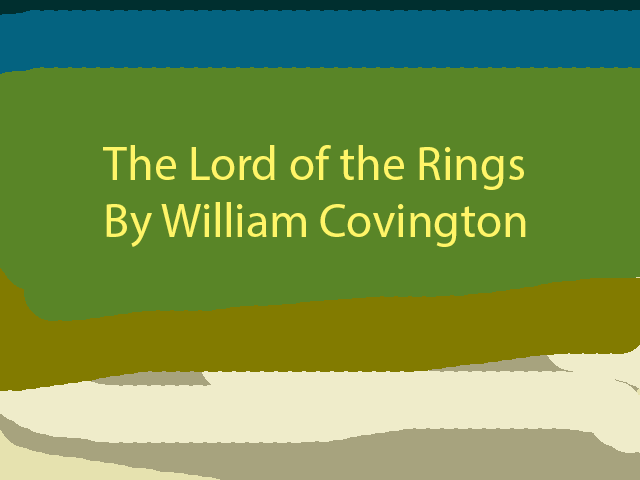
<style>
.page{position:relative;width:640px;height:480px;background:#598527}
.page>*{position:absolute;margin:0}
.t1{font:48px "MyriadPro-Regular";color:#fff568}
</style>
<div class="page">
<p class="t1" style="left:103px;top:145px;width:423px;height:102px">The Lord of the Rings<br>By William Covington</p>
</div>
